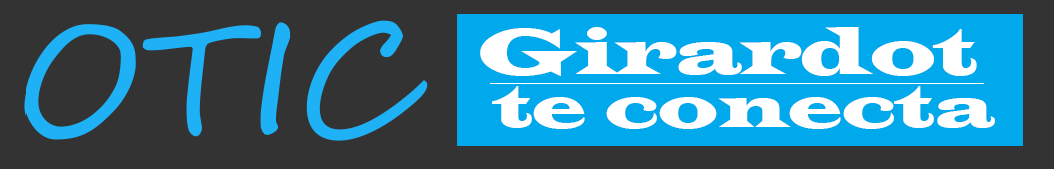
<style>
.page{position:relative;width:1054px;height:169px;background:#333333}
.page>*{position:absolute;margin:0}
.t1{font:66.7px "LatinWide";color:#ffffff}
.t2{font:61.1px "LatinWide";color:#ffffff}
</style>
<div class="page">
<p class="t1" style="left:480px;top:27px;width:497px;height:49px">Girardot</p>
<p class="t2" style="left:492px;top:86px;width:503px;height:43px">te conecta</p>
</div>
